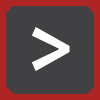
<style>
.page{position:relative;width:100px;height:100px;background:#414143}
.page>*{position:absolute;margin:0}
.t1{font:94.3px "Candara-Bold";color:#ffffff}
</style>
<div class="page">
<p class="t1" style="left:32px;top:27px;width:38px;height:44px">&gt;</p>
</div>
